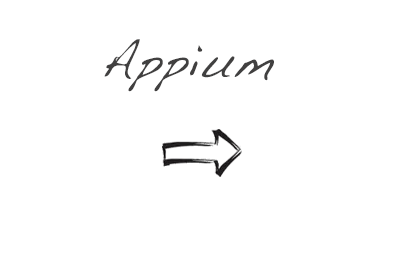
<style>
.page{position:relative;width:415px;height:275px;background:#ffffff}
.page>*{position:absolute;margin:0}
.t1{font:48px "Handwriting-Dakota";letter-spacing:-0.01em;color:#414040}
</style>
<div class="page">
<p class="t1" style="left:104px;top:39px;width:170px;height:53px">Appium</p>
</div>
